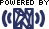
<style>
.page{position:relative;width:49px;height:29px;background:#ffffff}
.page>*{position:absolute;margin:0}
.t1{font:8px "Silkscreen";letter-spacing:-0.075em;color:#000000}
.t2{font:30px "NorthernSignalLogo";letter-spacing:-0.075em;color:#2b3361}
</style>
<div class="page">
<p class="t1" style="left:0px;top:0px;width:49px;height:5px">POWERED BY</p>
<p class="t2" style="left:1px;top:8px;width:44px;height:21px">$</p>
</div>
